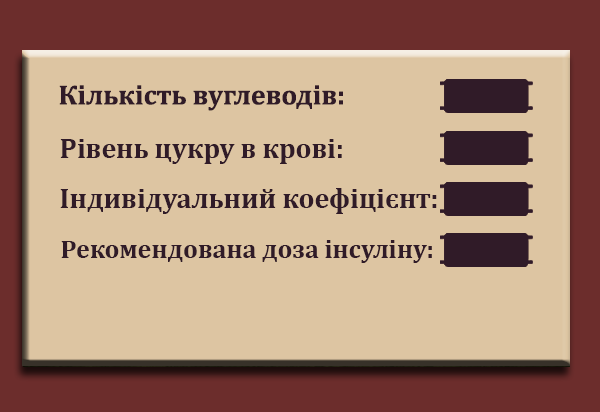
<style>
.page{position:relative;width:600px;height:412px;background:#ddc5a2}
.page>*{position:absolute;margin:0}
.t1{font:28px "Cambria-Bold";color:#301b28}
.t2{font:26px "Cambria-Bold";color:#301b28}
</style>
<div class="page">
<p class="t1" style="left:59px;top:85px;width:284px;height:26px">Кількість вуглеводів:</p>
<p class="t1" style="left:60px;top:139px;width:282px;height:25px">Рівень цукру в крові:</p>
<p class="t1" style="left:60px;top:188px;width:377px;height:26px">Індивідуальний коефіцієнт:</p>
<p class="t2" style="left:61px;top:240px;width:371px;height:23px">Рекомендована доза інсуліну:</p>
</div>
